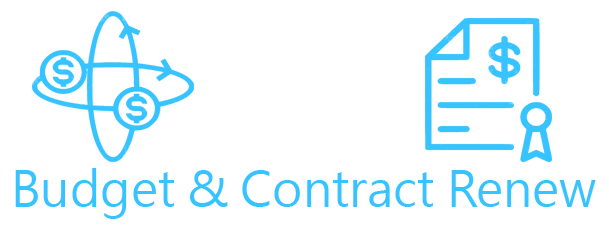
<style>
.page{position:relative;width:609px;height:231px;background:#ffffff}
.page>*{position:absolute;margin:0}
.t1{font:48px "MicrosoftJhengHeiUIRegular";color:#36c3ff}
</style>
<div class="page">
<p class="t1" style="left:15px;top:168px;width:581px;height:51px">Budget &amp; Contract Renew</p>
</div>
